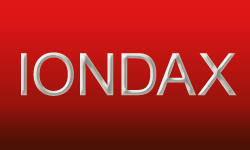
<style>
.page{position:relative;width:250px;height:150px}
.page>*{position:absolute;margin:0}
.t1{font:58.3px "ArialMT"}
</style>
<div class="page">
<p class="t1" style="left:21px;top:52px;width:216px;height:44px">IONDAX</p>
</div>
